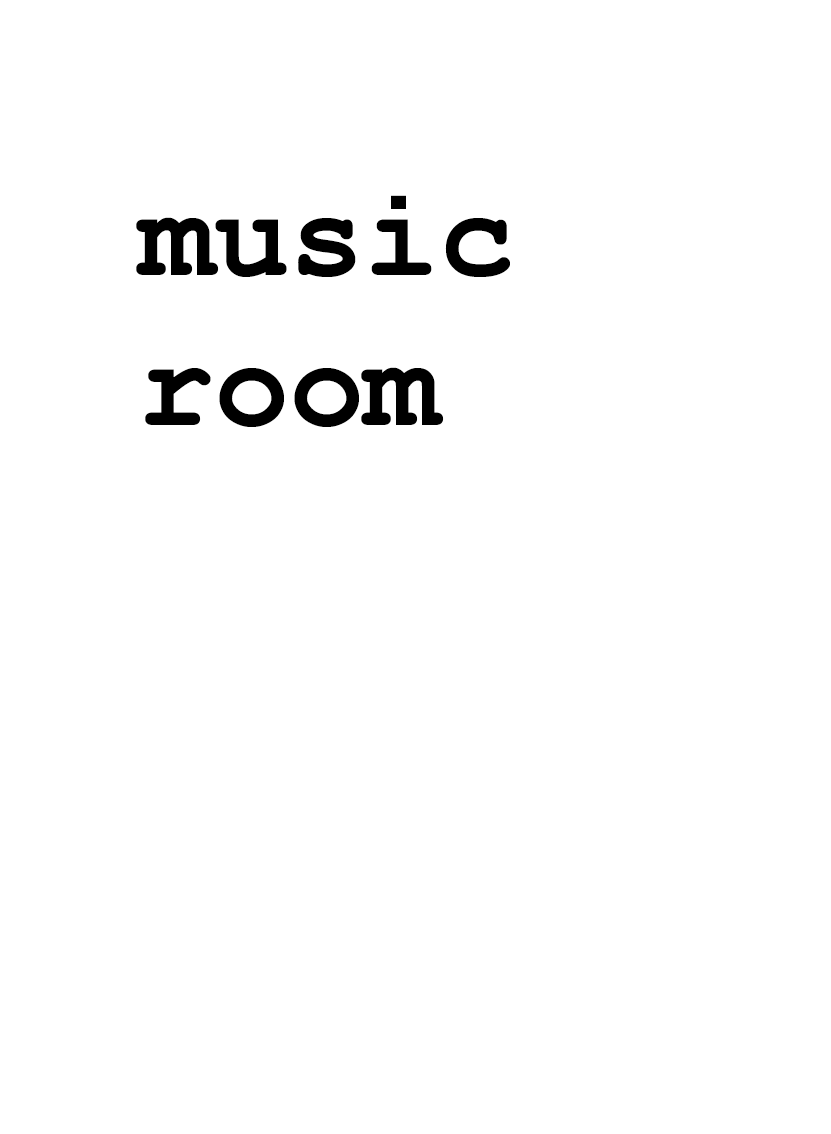
<style>
.page{position:relative;width:831px;height:1134px;background:#ffffff}
.page>*{position:absolute;margin:0}
.t1{font:125px "CourierNewPS-BoldMT";color:#000000}
</style>
<div class="page">
<p class="t1" style="left:136px;top:195px;width:374px;height:232px">music<br>room</p>
</div>
